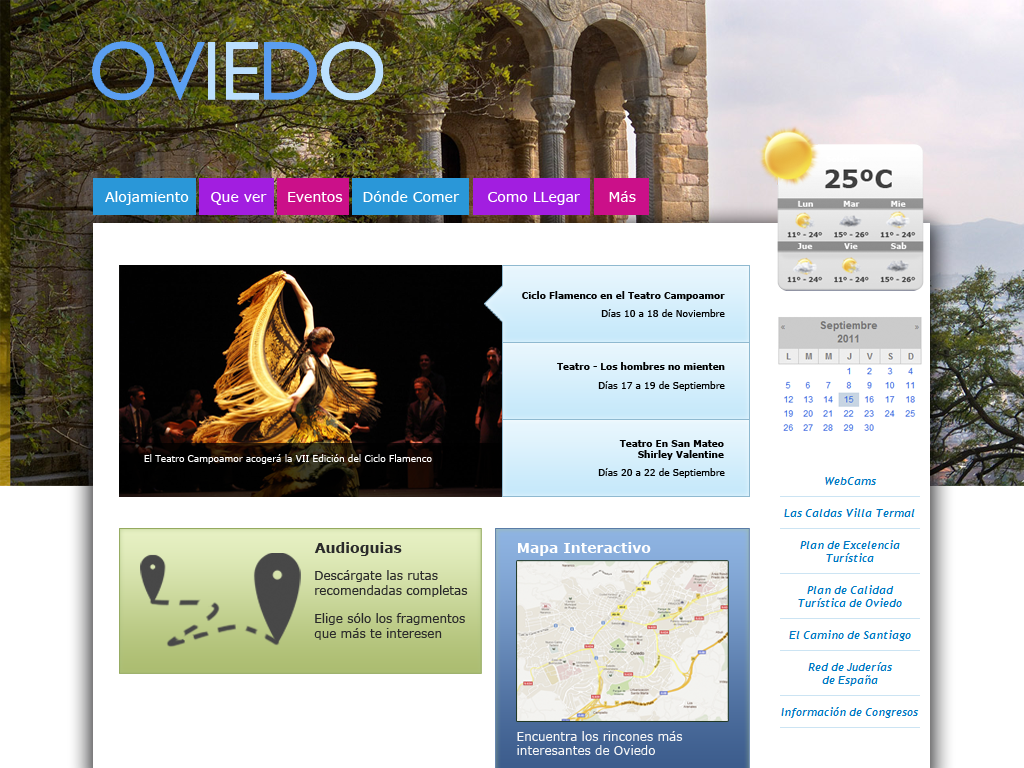
<style>
.page{position:relative;width:1024px;height:768px;background:#ffffff}
.page>*{position:absolute;margin:0}
.t1{font:14px "Verdana";color:#ffffff}
.t2{font:9px "Verdana-Bold";color:#000000}
.t3{font:9px "Verdana";color:#000000}
.t4{font:9px "Verdana";color:#ffffff}
.t5{font:14px "Verdana-Bold";color:#2b2b2b}
.t6{font:14px "Verdana-Bold";color:#ffffff}
.t7{font:12px "Verdana";color:#2b2b2b}
.t8{font:12px "Verdana";color:#f6f6f6}
</style>
<div class="page">
<p class="t1" style="left:105px;top:191px;width:84px;height:14px">Alojamiento</p>
<p class="t1" style="left:211px;top:192px;width:56px;height:13px">Que ver</p>
<p class="t1" style="left:288px;top:192px;width:55px;height:10px">Eventos</p>
<p class="t1" style="left:363px;top:191px;width:97px;height:11px">Dónde Comer</p>
<p class="t1" style="left:488px;top:192px;width:92px;height:13px">Como LLegar</p>
<p class="t1" style="left:609px;top:191px;width:27px;height:11px">Más</p>
<p class="t2" style="left:522px;top:291px;width:203px;height:10px">Ciclo Flamenco en el Teatro Campoamor</p>
<p class="t3" style="left:601px;top:309px;width:124px;height:8px">Días 10 a 18 de Noviembre</p>
<p class="t2" style="left:557px;top:362px;width:168px;height:8px">Teatro - Los hombres no mienten</p>
<p class="t3" style="left:598px;top:381px;width:127px;height:10px">Días 17 a 19 de Septiembre</p>
<p class="t2" style="left:619px;top:440px;width:105px;height:20px;text-align:right">Teatro En San Mateo<br>Shirley Valentine</p>
<p class="t4" style="left:144px;top:454px;width:288px;height:10px">El Teatro Campoamor acogerá la VII Edición del Ciclo Flamenco</p>
<p class="t3" style="left:598px;top:468px;width:127px;height:10px">Días 20 a 22 de Septiembre</p>
<p class="t5" style="left:314px;top:542px;width:88px;height:14px">Audioguias</p>
<p class="t6" style="left:518px;top:542px;width:133px;height:14px">Mapa Interactivo</p>
<p class="t7" style="left:314px;top:570px;width:154px;height:70px">Descárgate las rutas<br>recomendadas completas<br><br>Elige sólo los fragmentos <br>que más te interesen</p>
<p class="t8" style="left:517px;top:731px;width:166px;height:24px">Encuentra los rincones más<br>interesantes de Oviedo</p>
</div>
